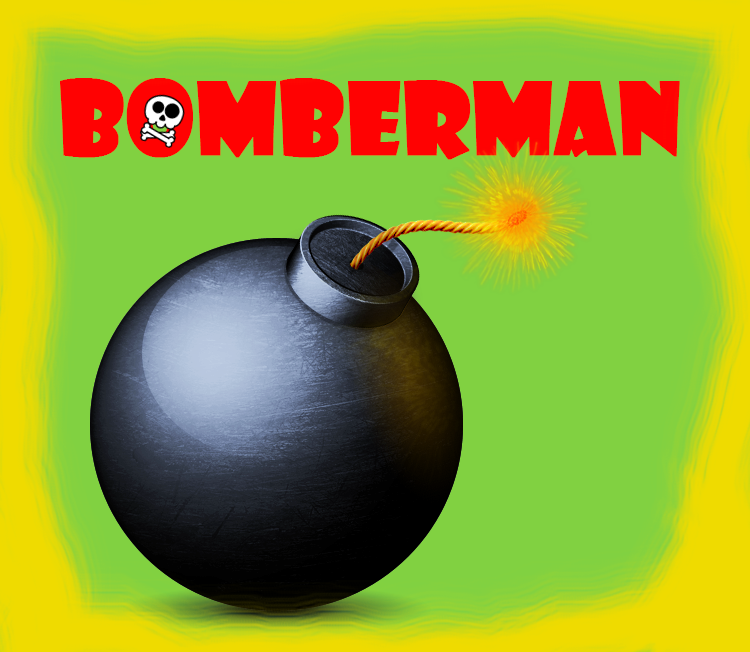
<style>
.page{position:relative;width:750px;height:652px;background:#81d141}
.page>*{position:absolute;margin:0}
.t1{font:97.2px "ShowcardGothic-Reg";color:#ff0202;font-weight:bold}
</style>
<div class="page">
<p class="t1" style="left:60px;top:78px;width:620px;height:82px">Bomberman</p>
</div>
